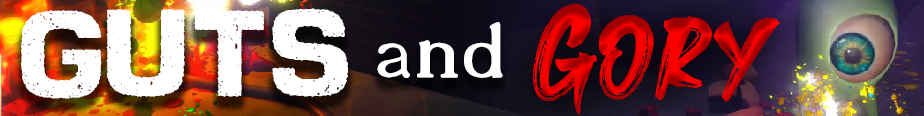
<style>
.page{position:relative;width:924px;height:116px}
.page>*{position:absolute;margin:0}
.t1{font:104.4px "MandhorRegular"}
.t2{font:142.7px "DIESELPOWERPERSONALUSE";color:#ffffff}
.t3{font:110.7px "18thCentury";color:#ffffff}
</style>
<div class="page">
<p class="t1" style="left:533px;top:3px;width:247px;height:112px">Gory</p>
<p class="t2" style="left:21px;top:8px;width:327px;height:91px">Guts</p>
<p class="t3" style="left:377px;top:22px;width:126px;height:56px">and</p>
</div>
